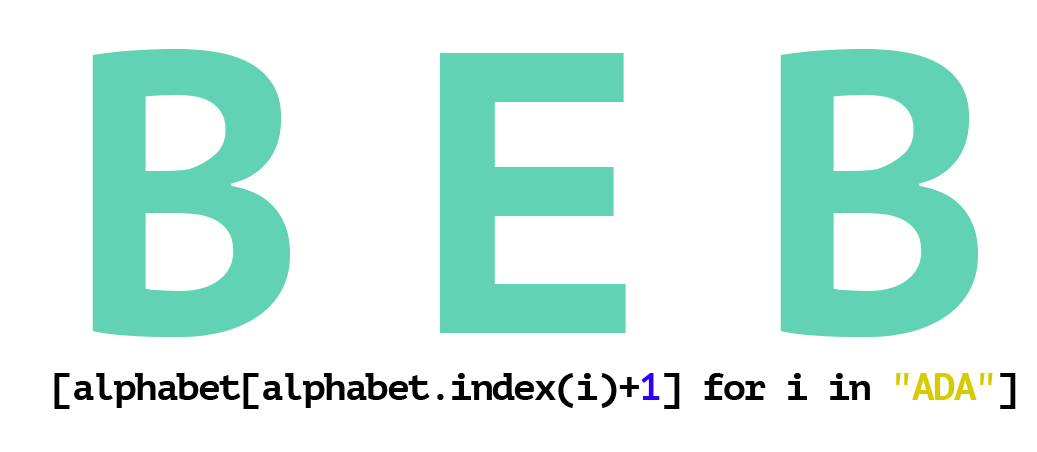
<style>
.page{position:relative;width:1037px;height:452px;background:#ffffff}
.page>*{position:absolute;margin:0}
.t1{font:400px "PTMono-Bold";letter-spacing:0.26em;color:#61d2b4}
.t2{font:37.5px "PTMono-Bold";letter-spacing:-0.04em;color:#000000}
.t3{font:37.5px "PTMono-Bold";letter-spacing:-0.04em;color:#2f00f8}
.t4{font:37.5px "PTMono-Bold";letter-spacing:-0.04em;color:#d6ca03}
</style>
<div class="page">
<p class="t1" style="left:92px;top:49px;width:886px;height:288px">BEB</p>
<p class="t2" style="left:54px;top:373px;width:962px;height:36px">[alphabet[alphabet.index(i)+<span class="t3">1</span>] for i in <span class="t4">"ADA"</span>]</p>
</div>
